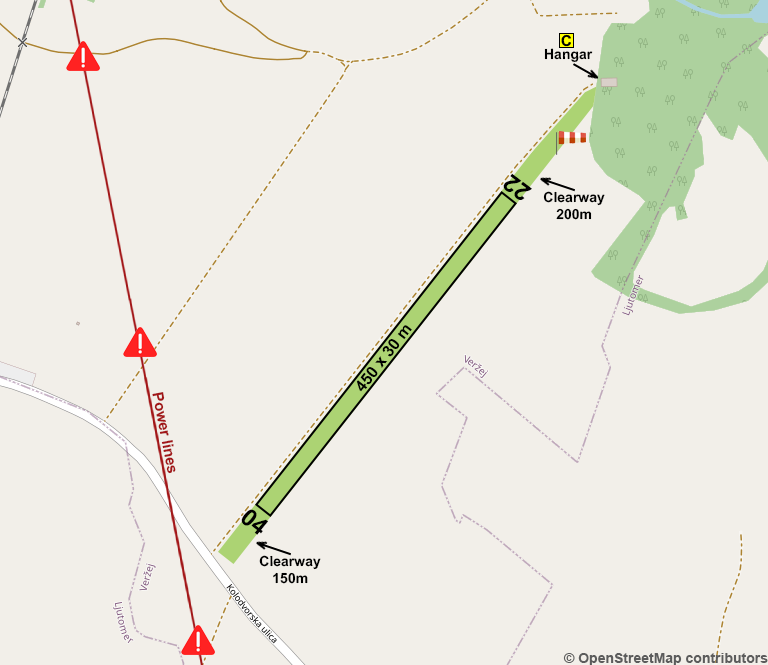
<style>
.page{position:relative;width:768px;height:665px;background:#f2efe9}
.page>*{position:absolute;margin:0}
.t1{font:14px "Arial-BoldMT";color:#000000}
.t2{font:24px "Arial-BoldMT";color:#000000}
.t3{font:16px "Arial-BoldMT";color:#000000}
.t4{font:15px "Arial-BoldMT";color:#a21618}
.t5{font:14px "Arial-BoldMT";color:#5c5c5c}
</style>
<div class="page">
<p class="t1" style="left:544px;top:48px;width:49px;height:14px;rotate:-1deg">Hangar</p>
<p class="t2" style="left:503px;top:173px;width:29px;height:27px;rotate:-143deg">22</p>
<p class="t1" style="left:543px;top:191px;width:62px;height:29px;text-align:center">Clearway<br>200m</p>
<p class="t3" style="left:356px;top:325px;width:56px;height:67px;rotate:-52deg">450 x 30 m</p>
<p class="t4" style="left:152px;top:392px;width:24px;height:82px;rotate:79deg">Power lines</p>
<p class="t2" style="left:241px;top:509px;width:27px;height:26px;rotate:39deg">04</p>
<p class="t1" style="left:259px;top:555px;width:62px;height:29px;text-align:center">Clearway<br>150m</p>
<p class="t5" style="left:563px;top:653px;width:205px;height:13px">© OpenStreetMap contributors</p>
</div>
